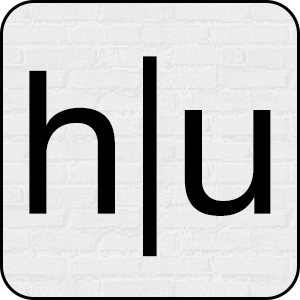
<style>
.page{position:relative;width:300px;height:300px}
.page>*{position:absolute;margin:0}
.t1{font:200px "HelveticaNeue";color:#000000}
</style>
<div class="page">
<p class="t1" style="left:29px;top:56px;width:242px;height:201px">h|u</p>
</div>
